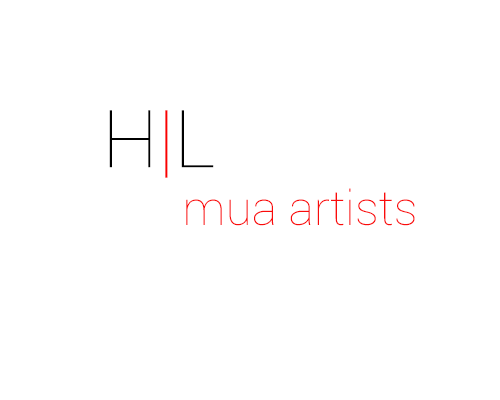
<style>
.page{position:relative;width:500px;height:400px;background:#ffffff}
.page>*{position:absolute;margin:0}
.t1{font:48px "Roboto-Thin";color:#fa0b0b}
.t2{font:80px "Roboto-Thin";color:#000000}
.t3{font:80px "Roboto-Thin";color:#fa0000}
</style>
<div class="page">
<p class="t1" style="left:109px;top:110px;width:306px;height:116px"><span class="t2">H</span><span class="t3">|</span><span class="t2">L<br>       </span>mua artists</p>
</div>
